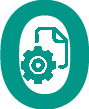
<style>
.page{position:relative;width:89px;height:109px;background:#009688}
.page>*{position:absolute;margin:0}
.t1{font:150px "Roboto-Medium";letter-spacing:0.01em;color:#009688}
</style>
<div class="page">
<p class="t1" style="left:0px;top:0px;width:89px;height:110px">O</p>
</div>
